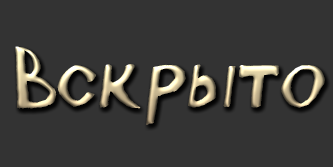
<style>
.page{position:relative;width:333px;height:167px;background:#333333}
.page>*{position:absolute;margin:0}
.t1{font:88px "ILKComic"}
</style>
<div class="page">
<p class="t1" style="left:15px;top:46px;width:310px;height:79px">Вскрыто</p>
</div>
